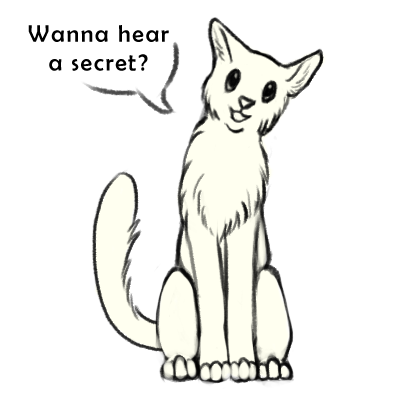
<style>
.page{position:relative;width:400px;height:400px;background:#ffffff}
.page>*{position:absolute;margin:0}
.t1{font:24px "BerlinSansFB-Reg";letter-spacing:0.075em;color:#000000}
</style>
<div class="page">
<p class="t1" style="left:28px;top:25px;width:141px;height:46px;text-align:center">Wanna hear a secret?</p>
</div>
